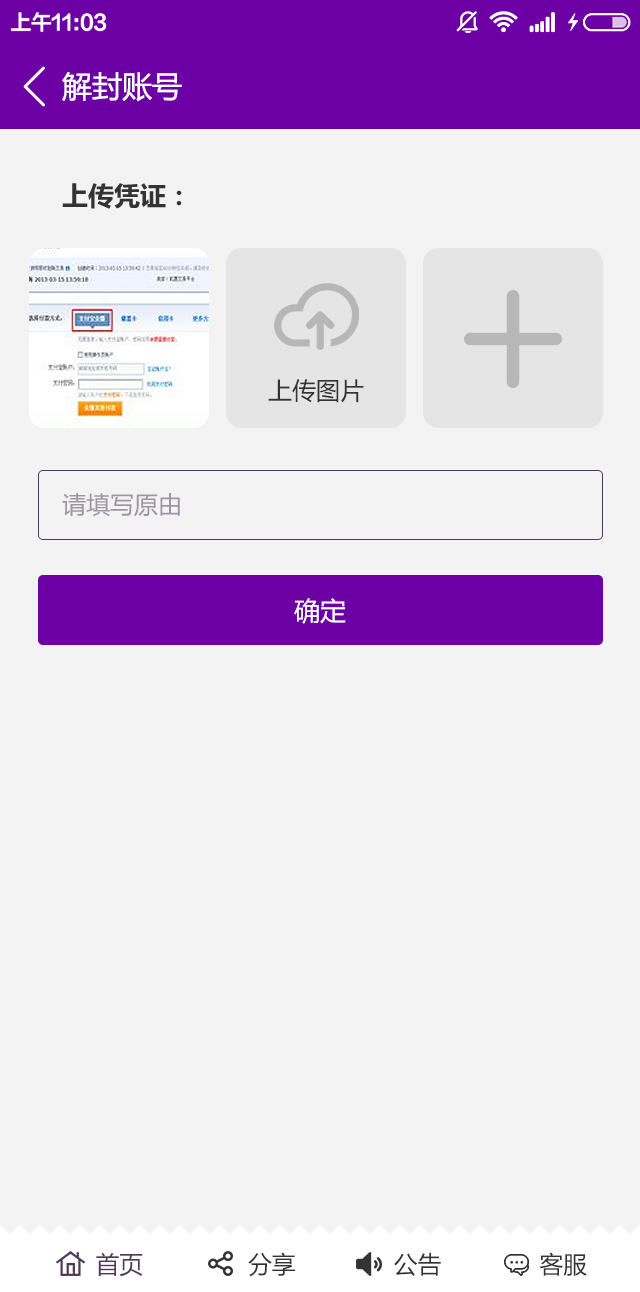
<style>
.page{position:relative;width:640px;height:1292px;background:#f3f3f3}
.page>*{position:absolute;margin:0}
.t1{font:30px "MicrosoftYaHei";color:#ffffff}
.t2{font:26px "Î¢ÈíÑÅºÚ83¹«ÉçÌØ±ð°æ\BBS.83GS.CN-B";color:#333333}
.t3{font:24px "MicrosoftYaHei";color:#333333}
.t4{font:24px "MicrosoftYaHei";color:#9e95a2}
.t5{font:26px "MicrosoftYaHei";color:#ffffff}
.t6{font:24px "MicrosoftYaHei";color:#50385b}
</style>
<div class="page">
<p class="t1" style="left:62px;top:72px;width:120px;height:30px">解封账号</p>
<p class="t2" style="left:62px;top:183px;width:120px;height:26px">上传凭证：</p>
<p class="t3" style="left:268px;top:379px;width:96px;height:24px">上传图片</p>
<p class="t4" style="left:62px;top:493px;width:118px;height:24px">请填写原由</p>
<p class="t5" style="left:294px;top:598px;width:52px;height:26px">确定</p>
<p class="t3" style="left:96px;top:1252px;width:491px;height:25px"><span class="t6">首页</span>               分享              公告              客服</p>
</div>
